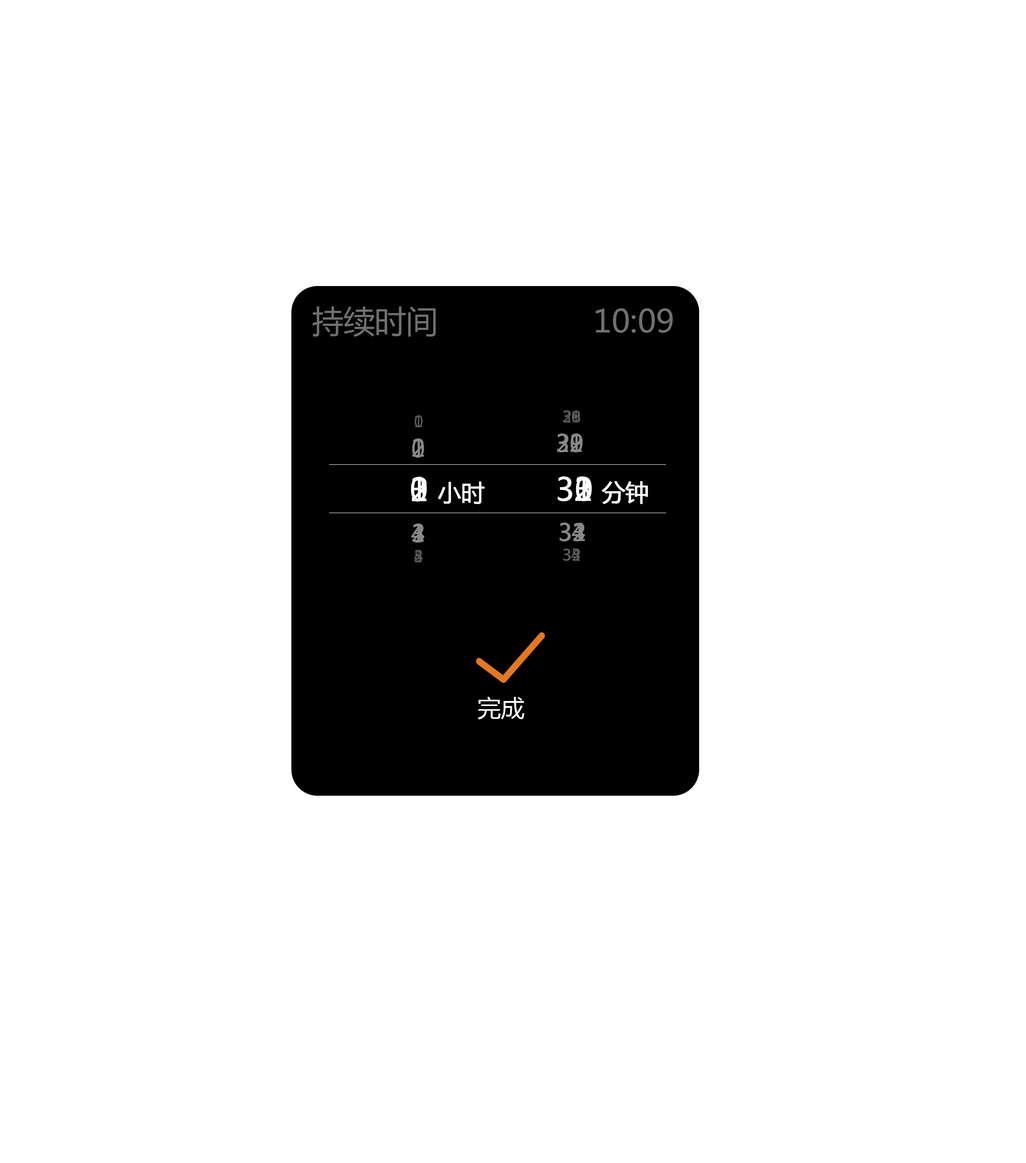
<style>
.page{position:relative;width:1026px;height:1163px;background:#ffffff}
.page>*{position:absolute;margin:0}
.t1{font:31.4px "MicrosoftYaHei";color:#717071}
.t2{font:15.7px "MicrosoftYaHei";color:#595757}
.t3{font:23.5px "MicrosoftYaHei";color:#888888}
.t4{font:23.5px "MicrosoftYaHei";color:#ffffff}
.t5{font:31.4px "MicrosoftYaHei";color:#ffffff}
</style>
<div class="page">
<p class="t1" style="left:312px;top:306px;width:124px;height:31px">持续时间</p>
<p class="t1" style="left:595px;top:308px;width:78px;height:25px">10:09</p>
<p class="t2" style="left:563px;top:410px;width:17px;height:12px">29</p>
<p class="t2" style="left:563px;top:410px;width:17px;height:12px">30</p>
<p class="t2" style="left:563px;top:410px;width:16px;height:12px">31</p>
<p class="t2" style="left:563px;top:410px;width:17px;height:12px">28</p>
<p class="t2" style="left:415px;top:415px;width:8px;height:12px">0</p>
<p class="t2" style="left:415px;top:415px;width:7px;height:12px">1</p>
<p class="t3" style="left:557px;top:434px;width:25px;height:18px">29</p>
<p class="t3" style="left:557px;top:434px;width:25px;height:18px">31</p>
<p class="t3" style="left:557px;top:433px;width:24px;height:19px">32</p>
<p class="t3" style="left:557px;top:434px;width:25px;height:18px">30</p>
<p class="t3" style="left:412px;top:439px;width:12px;height:18px">0</p>
<p class="t3" style="left:412px;top:438px;width:11px;height:19px">2</p>
<p class="t3" style="left:413px;top:438px;width:11px;height:19px">1</p>
<p class="t4" style="left:411px;top:477px;width:73px;height:27px"><span class="t5">0 </span>小时</p>
<p class="t4" style="left:412px;top:477px;width:72px;height:27px"><span class="t5">2 </span>小时</p>
<p class="t4" style="left:412px;top:477px;width:72px;height:27px"><span class="t5">3 </span>小时</p>
<p class="t4" style="left:412px;top:477px;width:72px;height:27px"><span class="t5">1 </span>小时</p>
<p class="t5" style="left:557px;top:477px;width:90px;height:27px">32 <span class="t4">分钟</span></p>
<p class="t5" style="left:557px;top:476px;width:90px;height:28px">33 <span class="t4">分钟</span></p>
<p class="t5" style="left:558px;top:477px;width:89px;height:27px">31 <span class="t4">分钟</span></p>
<p class="t5" style="left:558px;top:477px;width:90px;height:27px">30 <span class="t4">分钟</span></p>
<p class="t3" style="left:411px;top:524px;width:13px;height:18px">4</p>
<p class="t3" style="left:412px;top:523px;width:11px;height:19px">2</p>
<p class="t3" style="left:413px;top:523px;width:11px;height:19px">1</p>
<p class="t3" style="left:413px;top:524px;width:11px;height:18px">3</p>
<p class="t3" style="left:559px;top:523px;width:25px;height:18px">33</p>
<p class="t3" style="left:559px;top:522px;width:26px;height:19px">34</p>
<p class="t3" style="left:560px;top:523px;width:24px;height:18px">32</p>
<p class="t3" style="left:560px;top:523px;width:25px;height:18px">31</p>
<p class="t2" style="left:414px;top:550px;width:9px;height:12px">4</p>
<p class="t2" style="left:414px;top:550px;width:8px;height:12px">2</p>
<p class="t2" style="left:415px;top:550px;width:7px;height:12px">3</p>
<p class="t2" style="left:415px;top:550px;width:7px;height:12px">5</p>
<p class="t2" style="left:563px;top:549px;width:17px;height:12px">34</p>
<p class="t2" style="left:563px;top:548px;width:16px;height:12px">35</p>
<p class="t2" style="left:563px;top:549px;width:16px;height:12px">33</p>
<p class="t2" style="left:563px;top:549px;width:17px;height:12px">32</p>
<p class="t4" style="left:478px;top:696px;width:46px;height:23px">完成</p>
</div>
